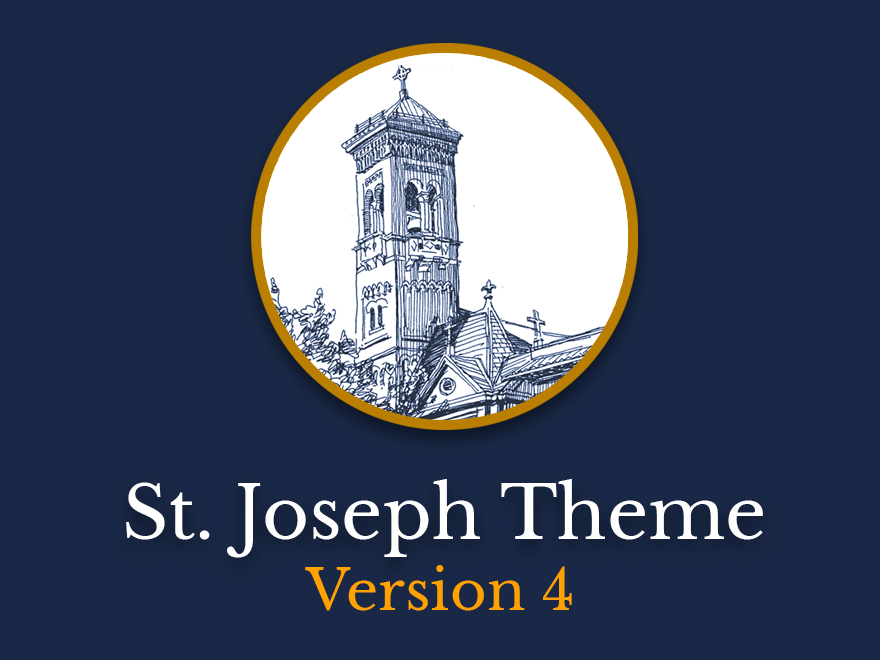
<style>
.page{position:relative;width:880px;height:660px;background:#192846}
.page>*{position:absolute;margin:0}
.t1{font:72px "LibreBaskerville-Regular";color:#ffffff}
.t2{font:56.4px "LibreBaskerville-Regular";color:#ffa200}
</style>
<div class="page">
<p class="t1" style="left:126px;top:479px;width:637px;height:79px">St. Joseph Theme</p>
<p class="t2" style="left:305px;top:565px;width:267px;height:46px">Version 4</p>
</div>
